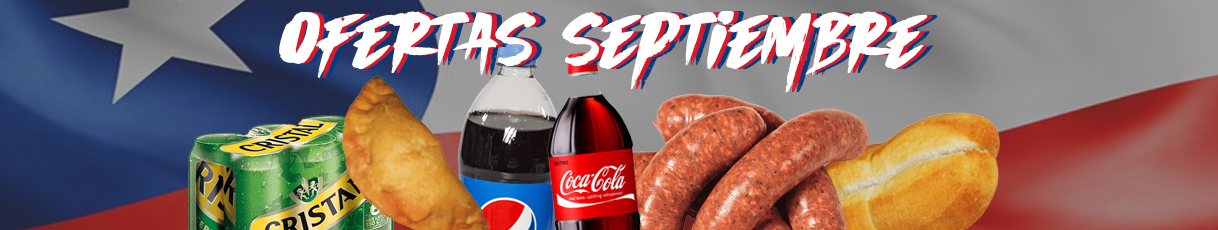
<style>
.page{position:relative;width:1218px;height:230px}
.page>*{position:absolute;margin:0}
.t1{font:109.4px "WildWolfRegular";color:#ffffff}
.t2{font:109.4px "WildWolfRegular"}
</style>
<div class="page">
<p class="t1" style="left:279px;top:10px;width:650px;height:83px">ofertas septiembre</p>
<p class="t2" style="left:284px;top:10px;width:650px;height:83px">ofertas septiembre</p>
</div>
